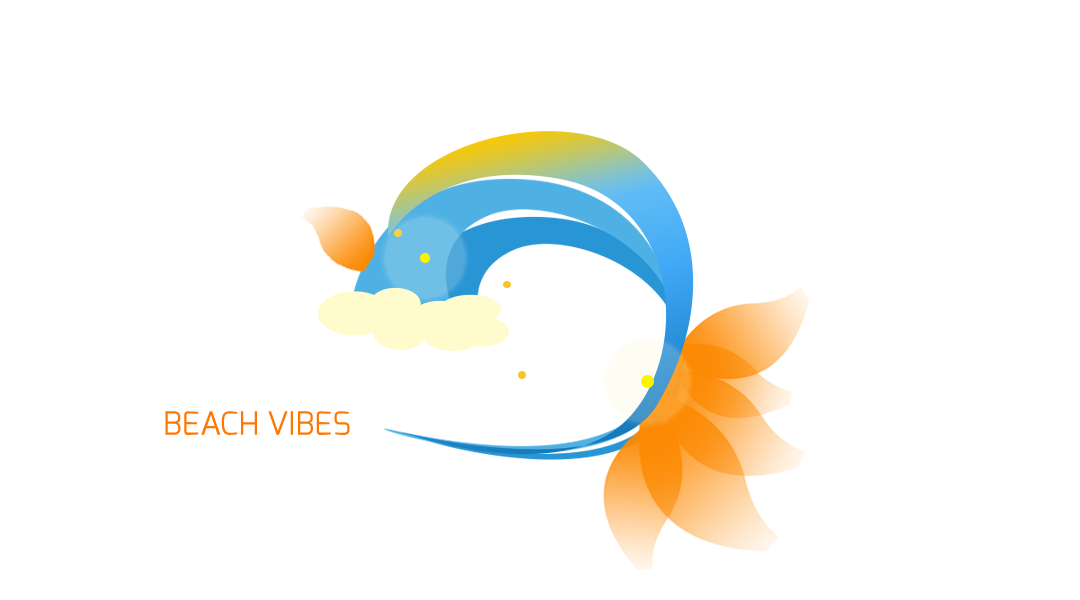
<style>
.page{position:relative;width:1080px;height:600px;background:#ffffff}
.page>*{position:absolute;margin:0}
.t1{font:32px "Exo-Regular";color:#fc7803;text-transform:uppercase}
</style>
<div class="page">
<p class="t1" style="left:165px;top:411px;width:185px;height:24px">beach vibes</p>
</div>
